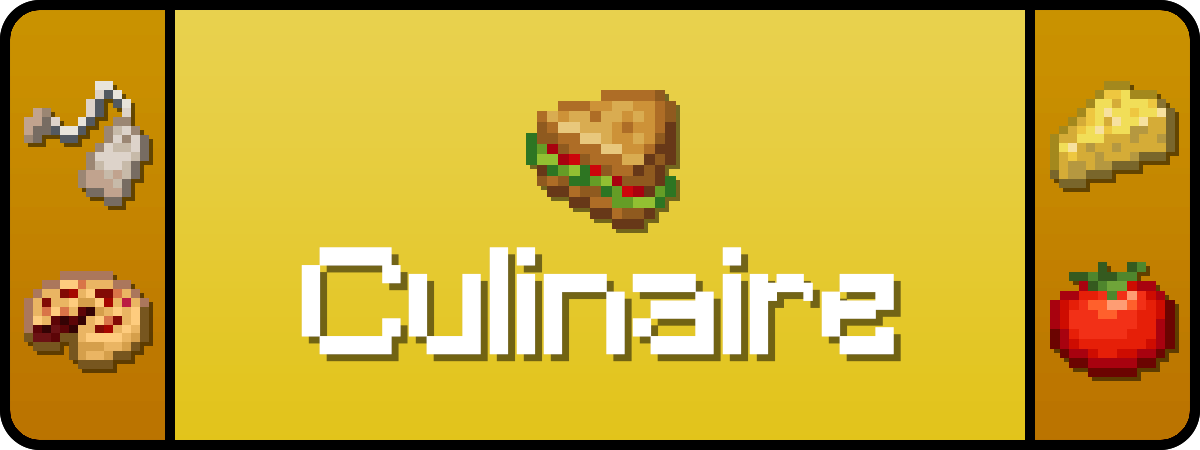
<style>
.page{position:relative;width:1200px;height:450px}
.page>*{position:absolute;margin:0}
.t1{font:142.3px "Minecraft";letter-spacing:-0.025em;color:#ffffff;font-weight:bold}
</style>
<div class="page">
<p class="t1" style="left:301px;top:247px;width:593px;height:108px">Culinaire</p>
</div>
